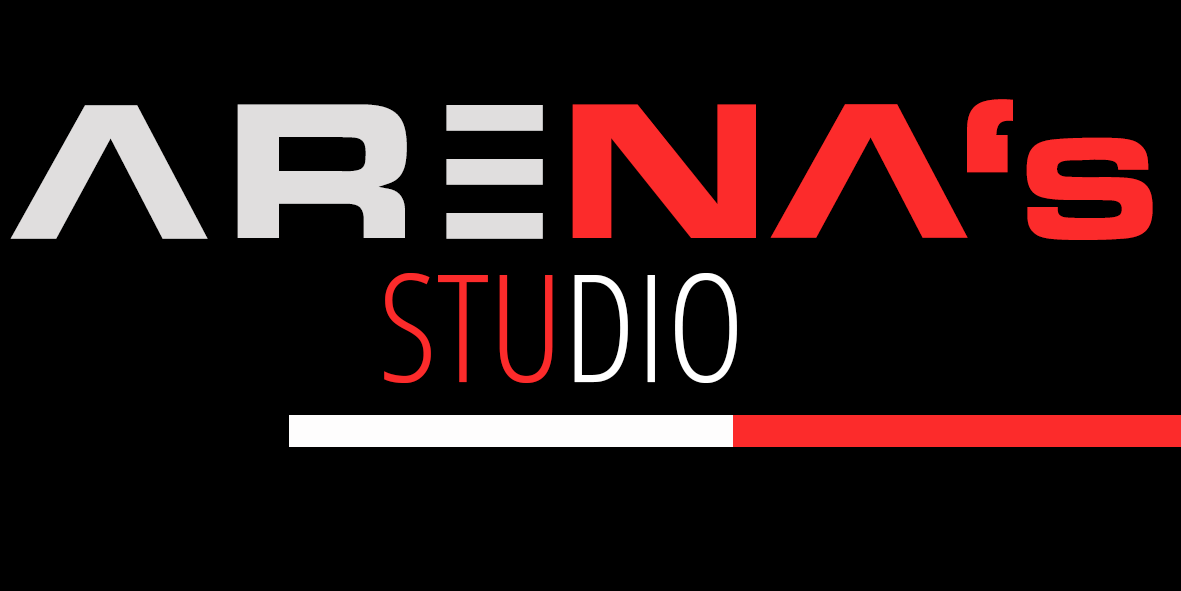
<style>
.page{position:relative;width:1181px;height:591px;background:#000000}
.page>*{position:absolute;margin:0}
.t1{font:200px "EurostileMN-ExtendedBold";color:#fc2b2b}
.t2{font:200px "EurostileMN-ExtendedBold";color:#e0dede}
.t3{font:150px "EurostileMN-ExtendedBold";color:#e0dede;scale:1.38 1}
.t4{font:150px "EurostileMN-ExtendedBold";color:#fc2b2b}
.t5{font:150px "OpenSans-CondensedLight";color:#fc2b2b}
.t6{font:150px "OpenSans-CondensedLight";color:#ffffff}
</style>
<div class="page">
<p class="t1" style="left:967px;top:99px;width:46px;height:74px">‘</p>
<p class="t2" style="left:10px;top:105px;width:198px;height:134px;rotate:180deg">V</p>
<p class="t2" style="left:237px;top:104px;width:170px;height:134px">R</p>
<p class="t3" style="left:446px;top:105px;width:97px;height:26px">-</p>
<p class="t1" style="left:572px;top:104px;width:184px;height:134px">N</p>
<p class="t1" style="left:770px;top:104px;width:198px;height:134px;rotate:180deg">V</p>
<p class="t4" style="left:1026px;top:137px;width:127px;height:103px">S</p>
<p class="t3" style="left:446px;top:159px;width:97px;height:26px">-</p>
<p class="t3" style="left:446px;top:213px;width:97px;height:26px">-</p>
<p class="t5" style="left:384px;top:273px;width:353px;height:110px">STU<span class="t6">DIO</span></p>
</div>
